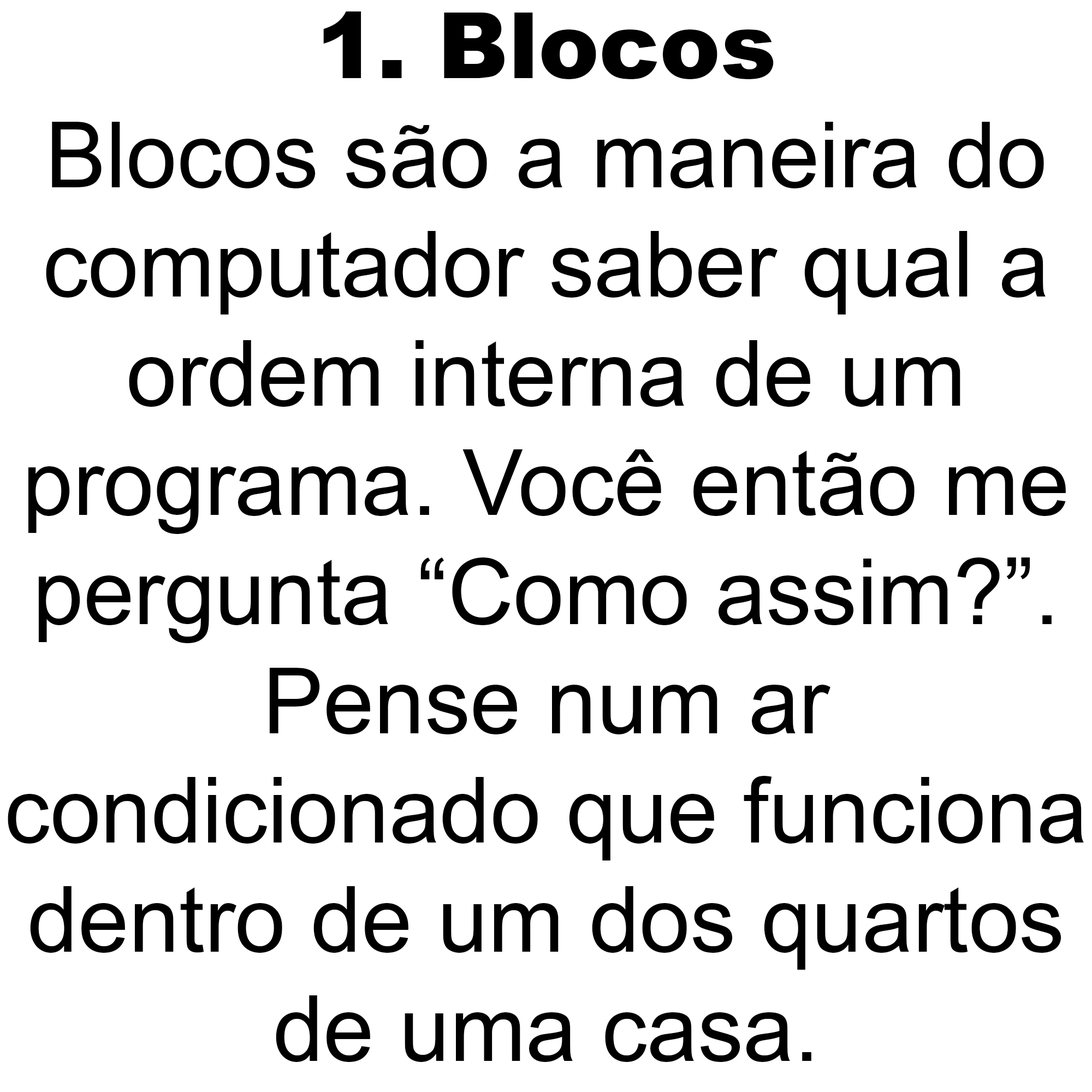
<style>
.page{position:relative;width:1092px;height:1092px;background:#ffffff}
.page>*{position:absolute;margin:0}
.t1{font:91px "ArialMT";color:#000000}
.t2{font:91px "Arial-Black";color:#000000}
</style>
<div class="page">
<p class="t1" style="left:8px;top:11px;width:1076px;height:1051px;text-align:center"><span class="t2">1. Blocos<br></span>Blocos são a maneira do<br>computador saber qual a<br>ordem interna de um<br>programa. Você então me<br>pergunta “Como assim?”.<br>Pense num ar<br>condicionado que funciona<br>dentro de um dos quartos<br>de uma casa.</p>
</div>
